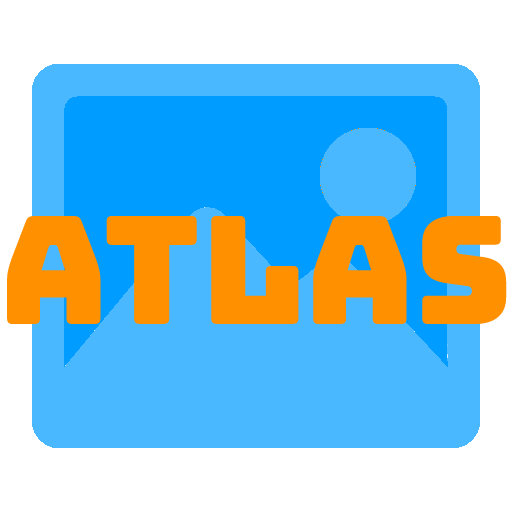
<style>
.page{position:relative;width:512px;height:512px;background:#49b8ff}
.page>*{position:absolute;margin:0}
.t1{font:150px "Bungee-Regular";color:#ff9000}
</style>
<div class="page">
<p class="t1" style="left:7px;top:216px;width:500px;height:108px">ATLAS</p>
</div>
